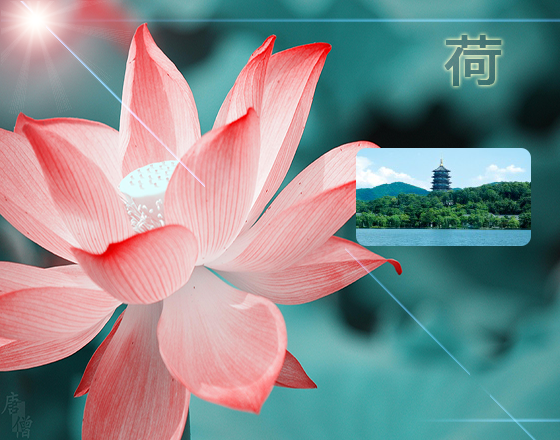
<style>
.page{position:relative;width:560px;height:440px}
.page>*{position:absolute;margin:0}
.t1{font:52.2px "MicrosoftYaHei";color:#4d7b7a;font-weight:bold;scale:1.09 1}
</style>
<div class="page">
<p class="t1" style="left:444px;top:35px;width:58px;height:51px">荷</p>
</div>
